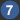
<style>
.page{position:relative;width:20px;height:20px;background:#3b5f97}
.page>*{position:absolute;margin:0}
.t1{font:14px "Arial-BoldMT";letter-spacing:0.025em;color:#fcfdfd}
</style>
<div class="page">
<p class="t1" style="left:6px;top:5px;width:7px;height:10px">7</p>
</div>
